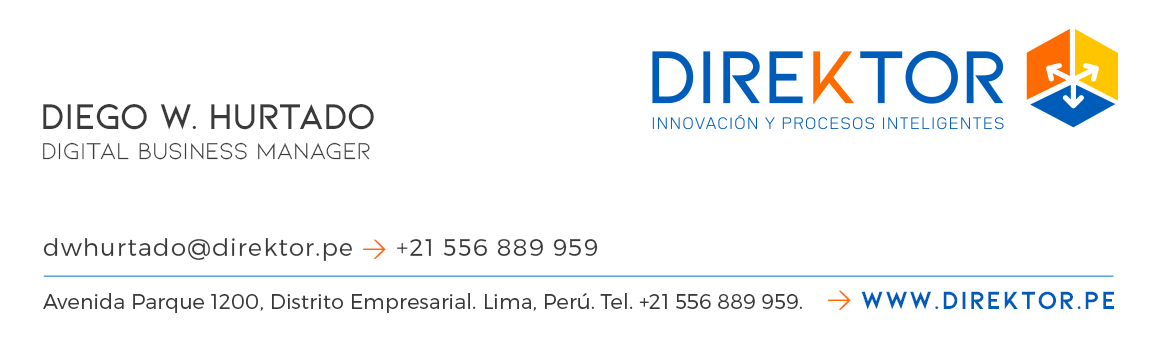
<style>
.page{position:relative;width:1166px;height:349px;background:#ffffff}
.page>*{position:absolute;margin:0}
.t1{font:37.9px "Kiona-SemiBold";letter-spacing:-0.025em;color:#3a3a3a}
.t2{font:24.2px "Kiona-Regular";letter-spacing:-0.01em;color:#3a3a3a}
.t3{font:24.3px "Montserrat-Light";letter-spacing:0.05em;color:#3a3a3a}
.t4{font:24.3px "DIN-Regular";letter-spacing:0.05em;color:#ff6b00}
.t5{font:20.6px "Montserrat-Light";letter-spacing:0.01em;color:#3a3a3a}
.t6{font:26.1px "Kiona-Bold";letter-spacing:0.049em;color:#005cb9}
</style>
<div class="page">
<p class="t1" style="left:43px;top:104px;width:331px;height:26px">DIEGO W. HURTADO</p>
<p class="t2" style="left:43px;top:142px;width:327px;height:18px">Digital Business Manager</p>
<p class="t3" style="left:43px;top:238px;width:555px;height:23px">dwhurtado@direktor.pe <span class="t4">&gt;</span> +21 556 889 959</p>
<p class="t5" style="left:43px;top:293px;width:759px;height:20px">Avenida Parque 1200, Distrito Empresarial. Lima, Perú. Tel. +21 556 889 959.</p>
<p class="t6" style="left:828px;top:290px;width:286px;height:20px"><span class="t4">&gt; </span>www.direktor.pe</p>
</div>
